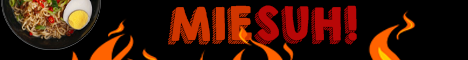
<style>
.page{position:relative;width:468px;height:60px;background:#000000}
.page>*{position:absolute;margin:0}
.t1{font:40.9px "KGHAPPY";color:#b80707}
.t2{font:40.9px "KGHAPPY";color:#d03600}
</style>
<div class="page">
<p class="t1" style="left:168px;top:5px;width:189px;height:40px"><span class="t2">MIE</span>SUH!</p>
</div>
